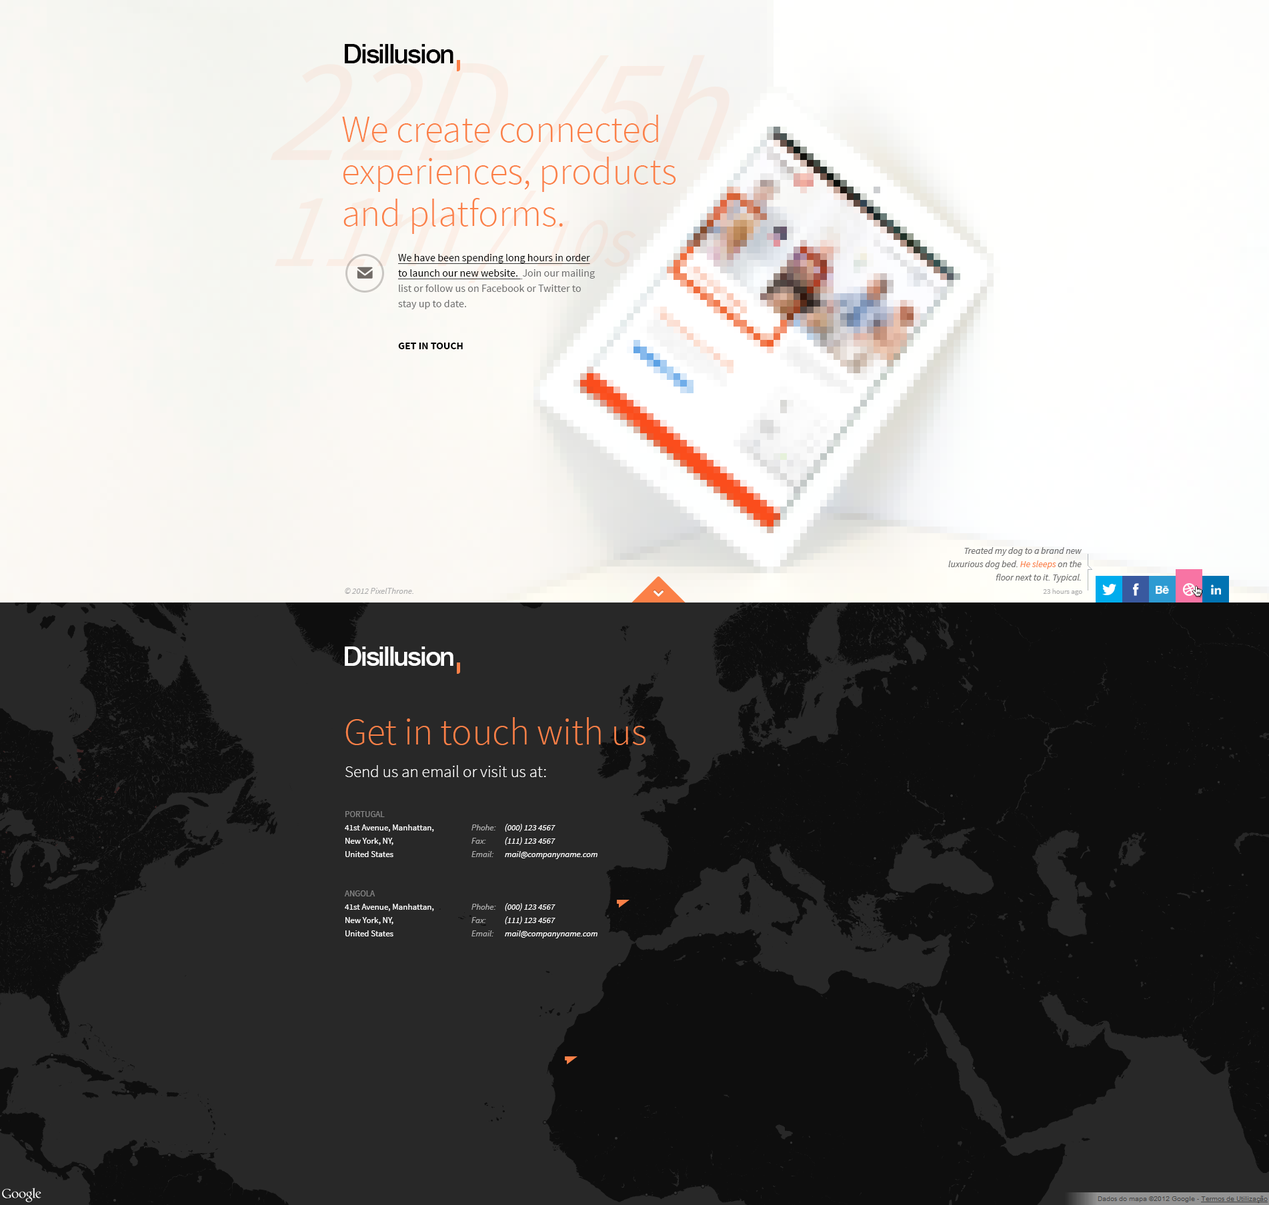
<style>
.page{position:relative;width:1269px;height:1205px;background:#282828}
.page>*{position:absolute;margin:0}
.t1{font:26.7px "HelveticaNeue-Medium";letter-spacing:-0.05em;color:#000000}
.t2{font:38px/42px "SourceSansPro-Light";color:#fb8047}
.t3{font:10.7px/15.3px "SourceSansPro-Regular";color:#6e6e6e}
.t4{font:10.7px/15.3px "SourceSansPro-Regular";color:#000000;text-decoration:underline}
.t5{font:10.7px "SourceSansPro-Bold";letter-spacing:-0.01em;color:#000000;text-transform:uppercase}
.t6{font:9.3px/13.3px "SourceSansPro-It";color:#6e6e6e}
.t7{font:9.3px/13.3px "SourceSansPro-It";color:#fb8047}
.t8{font:8.7px "SourceSansPro-It";color:#aeaeae}
.t9{font:7.3px "SourceSansPro-Regular";color:#aeaeae}
.t10{font:26.7px "HelveticaNeue-Medium";letter-spacing:-0.05em;color:#ffffff}
.t11{font:38px "SourceSansPro-Light";color:#fb8047}
.t12{font:16.7px "SourceSansPro-Light";color:#ffffff}
.t13{font:8.7px/13.3px "SourceSansPro-Regular";color:#ffffff}
.t14{font:8.7px/13.3px "SourceSansPro-Regular";color:#858585}
.t15{font:8.7px/13.3px "SourceSansPro-It";color:#ababab}
.t16{font:8.7px/13.3px "SourceSansPro-It";color:#ffffff}
</style>
<div class="page">
<p class="t1" style="left:345px;top:44px;width:108px;height:19px">Disillusion</p>
<p class="t2" style="left:342px;top:115px;width:334px;height:119px">We create connected experiences, products and platforms.</p>
<p class="t3" style="left:398px;top:254px;width:197px;height:55px"><span class="t4">We have been spending long hours in order to launch our new website.  </span>Join our mailing list or follow us on Facebook or Twitter to stay up to date.</p>
<p class="t5" style="left:398px;top:343px;width:65px;height:6px">GET IN TOUCH</p>
<p class="t6" style="left:948px;top:547px;width:134px;height:36px;text-align:right">Treated my dog to a brand new luxurious dog bed. <span class="t7">He sleeps</span> on the floor next to it. Typical.</p>
<p class="t8" style="left:345px;top:588px;width:68px;height:6px">© 2012 PixelThrone.</p>
<p class="t9" style="left:1043px;top:589px;width:39px;height:6px">23 hours ago</p>
<p class="t10" style="left:345px;top:647px;width:108px;height:19px">Disillusion</p>
<p class="t11" style="left:345px;top:717px;width:301px;height:28px">Get in touch with us</p>
<p class="t12" style="left:345px;top:765px;width:201px;height:12px">Send us an email or visit us at:</p>
<p class="t13" style="left:345px;top:811px;width:89px;height:46px"><span class="t14">PORTUGAL<br></span>41st Avenue, Manhattan, <br>New York, NY, <br>United States</p>
<p class="t15" style="left:471px;top:825px;width:25px;height:32px">Phohe:<br>Fax:<br>Email:</p>
<p class="t16" style="left:505px;top:824px;width:92px;height:35px">(000) 123 4567<br>(111) 123 4567<br>mail@companyname.com</p>
<p class="t13" style="left:344px;top:891px;width:90px;height:46px"><span class="t14">ANGOLA<br></span>41st Avenue, Manhattan, <br>New York, NY, <br>United States</p>
<p class="t15" style="left:471px;top:904px;width:25px;height:33px">Phohe:<br>Fax:<br>Email:</p>
<p class="t16" style="left:505px;top:903px;width:92px;height:36px">(000) 123 4567<br>(111) 123 4567<br>mail@companyname.com</p>
</div>
